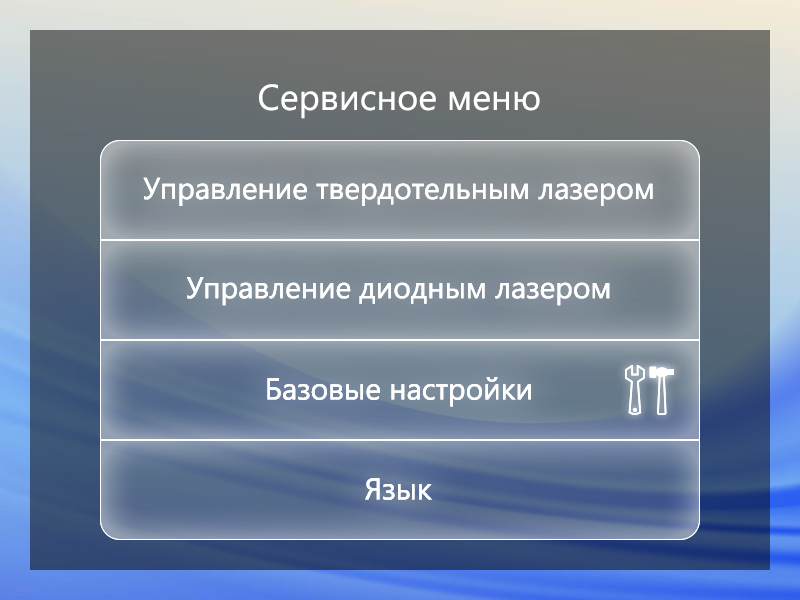
<style>
.page{position:relative;width:800px;height:600px}
.page>*{position:absolute;margin:0}
.t1{font:36px "SegoeUI";color:#ffffff}
.t2{font:30px "SegoeUI";color:#ffffff}
</style>
<div class="page">
<p class="t1" style="left:259px;top:84px;width:281px;height:35px">Сервисное меню</p>
<p class="t2" style="left:143px;top:177px;width:510px;height:29px">Управление твердотельным лазером</p>
<p class="t2" style="left:143px;top:177px;width:510px;height:29px">Управление твердотельным лазером</p>
<p class="t2" style="left:187px;top:277px;width:423px;height:29px">Управление диодным лазером</p>
<p class="t2" style="left:187px;top:277px;width:423px;height:29px">Управление диодным лазером</p>
<p class="t2" style="left:267px;top:377px;width:264px;height:30px">Базовые настройки</p>
<p class="t2" style="left:267px;top:377px;width:264px;height:30px">Базовые настройки</p>
<p class="t2" style="left:365px;top:478px;width:67px;height:22px">Язык</p>
<p class="t2" style="left:365px;top:478px;width:67px;height:22px">Язык</p>
</div>
